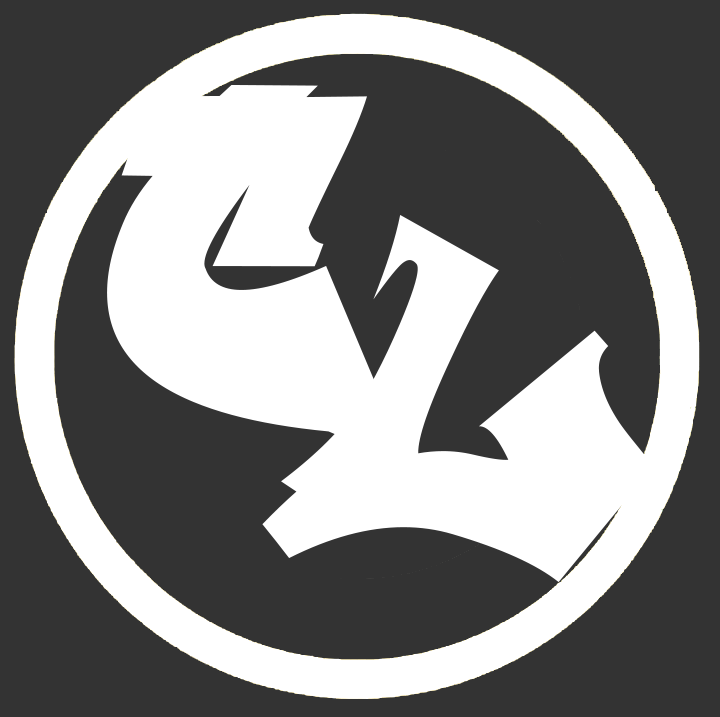
<style>
.page{position:relative;width:720px;height:717px;background:#333333}
.page>*{position:absolute;margin:0}
.t1{font:460.2px "ReskaGraf";color:#ffffff}
.t2{font:454.5px "ReskaGraf";color:#ffffff}
</style>
<div class="page">
<p class="t1" style="left:107px;top:85px;width:298px;height:376px">C</p>
<p class="t2" style="left:262px;top:215px;width:392px;height:367px">L</p>
</div>
